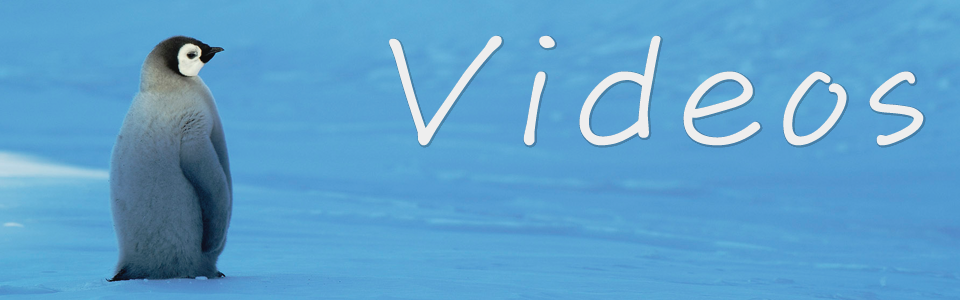
<style>
.page{position:relative;width:960px;height:300px}
.page>*{position:absolute;margin:0}
.t1{font:166.7px "DFTegakiKaku-W4-WING-RKSJ-H";letter-spacing:0.06em;color:#eeeeee}
</style>
<div class="page">
<p class="t1" style="left:389px;top:35px;width:535px;height:111px">Videos</p>
</div>
